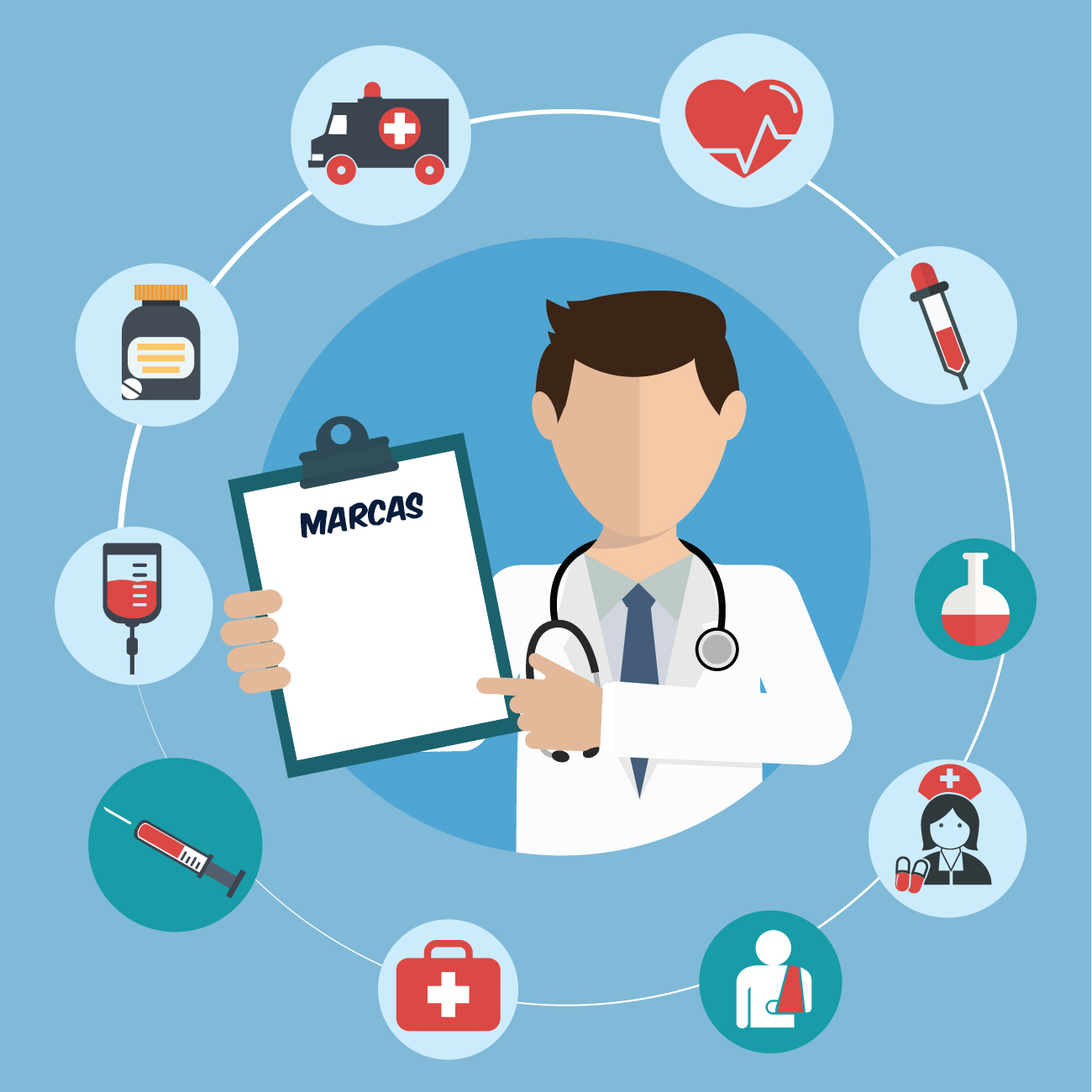
<style>
.page{position:relative;width:1092px;height:1092px;background:#81bad8}
.page>*{position:absolute;margin:0}
.t1{font:28.6px "KomikaAxis";color:#061d3b}
</style>
<div class="page">
<p class="t1" style="left:300px;top:491px;width:123px;height:47px;rotate:-10deg">marcas</p>
</div>
